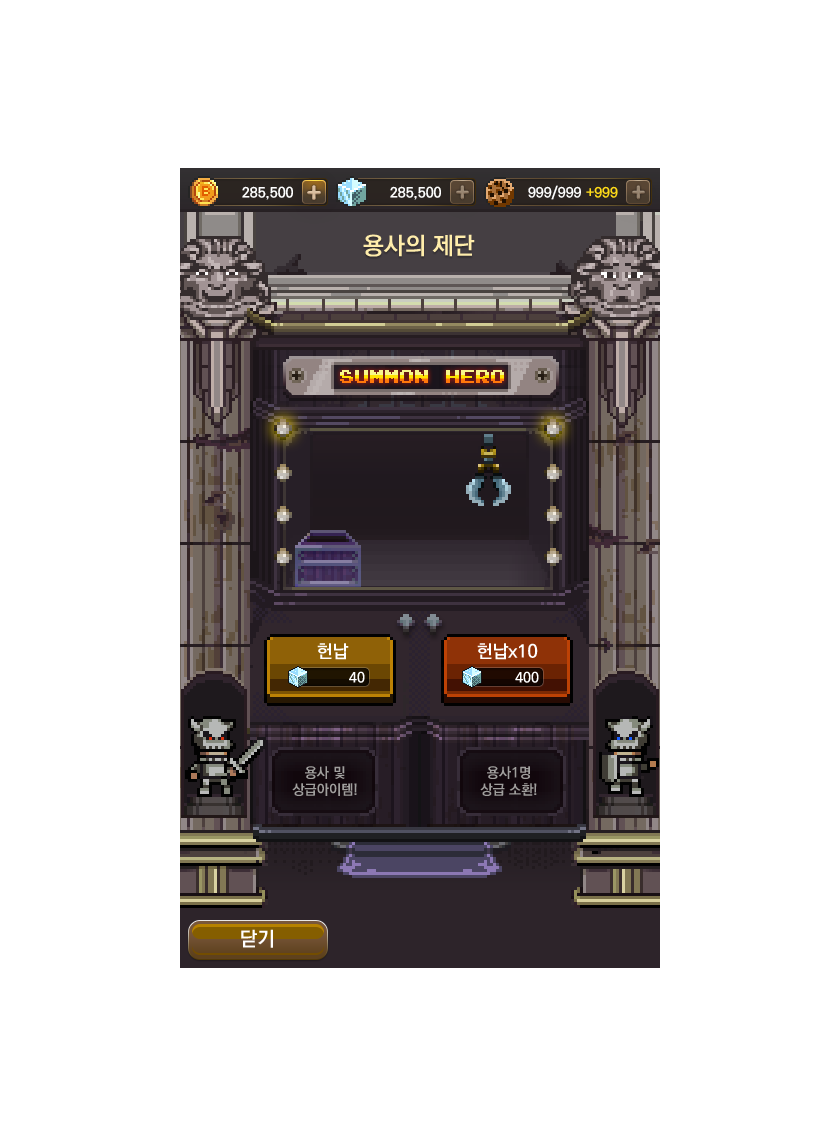
<style>
.page{position:relative;width:840px;height:1136px;background:#ffffff}
.page>*{position:absolute;margin:0}
.t1{font:24px "KoPubDotumBold";color:#ffedab}
.t2{font:15px "PressStart2P"}
.t3{font:18px "KoPubDotumBold";color:#ffffff}
.t4{font:14px "KoPubDotumBold";color:#ffffff}
.t5{font:14px "KoPubDotumBold";color:#a09f9d}
.t6{font:20px "KoPubDotumBold";color:#ffffff}
</style>
<div class="page">
<p class="t1" style="left:363px;top:234px;width:112px;height:23px">용사의 제단</p>
<p class="t2" style="left:340px;top:370px;width:164px;height:13px">SUMMON HERO</p>
<p class="t3" style="left:317px;top:643px;width:32px;height:17px">헌납</p>
<p class="t3" style="left:477px;top:643px;width:61px;height:17px">헌납x10</p>
<p class="t4" style="left:349px;top:671px;width:16px;height:12px">40</p>
<p class="t4" style="left:515px;top:671px;width:24px;height:12px">400</p>
<p class="t5" style="left:292px;top:766px;width:65px;height:30px;text-align:center">용사 및<br>상급아이템!</p>
<p class="t5" style="left:480px;top:766px;width:57px;height:30px;text-align:center">용사1명<br>상급 소환!</p>
<p class="t6" style="left:241px;top:929px;width:32px;height:19px">닫기</p>
</div>
